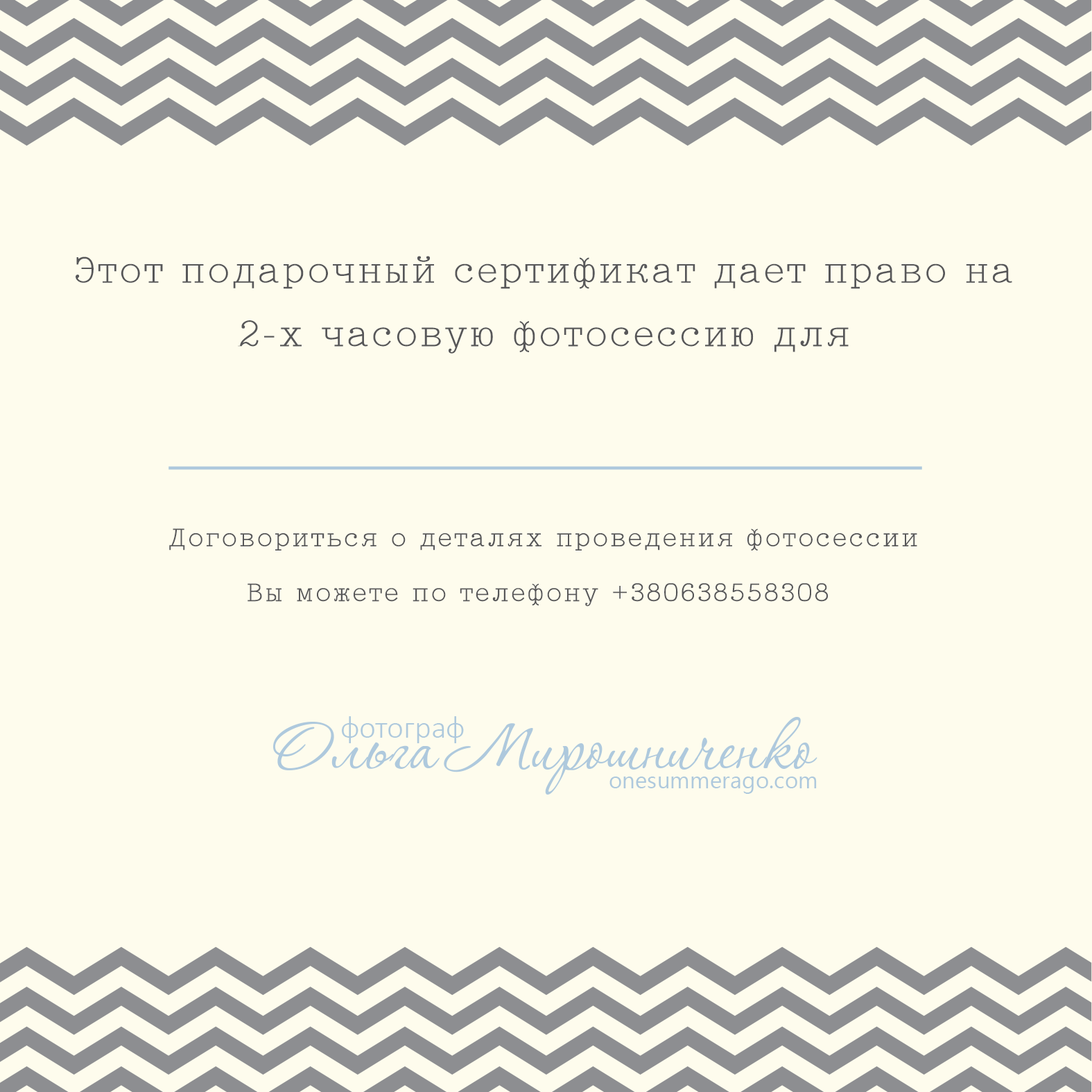
<style>
.page{position:relative;width:1092px;height:1092px;background:#fefced}
.page>*{position:absolute;margin:0}
.t1{font:34.9px/63.6px "TypeWriterCyrNormal";letter-spacing:0.025em;color:#575759;font-weight:bold;scale:1.08 1}
.t2{font:24.2px/54.9px "TypeWriterCyrNormal";letter-spacing:0.045em;color:#575759;font-weight:bold;scale:1.08 1}
.t3{font:86.7px "Corinthia";color:#aec9dd}
.t4{font:31.8px "Calibri-Light";color:#aec9dd}
.t5{font:23.1px "Ebrima";color:#aec9dd}
</style>
<div class="page">
<p class="t1" style="left:76px;top:256px;width:936px;height:98px;text-align:center">Этот подарочный сертификат дает право на<br>2-х часовую фотосессию для</p>
<p class="t2" style="left:169px;top:528px;width:748px;height:79px;text-align:center">Договориться о деталях проведения фотосессии<br>Вы можете по телефону +380638558308</p>
<p class="t3" style="left:273px;top:717px;width:544px;height:78px">Ольга Мирошниченко</p>
<p class="t4" style="left:342px;top:716px;width:122px;height:27px">фотограф</p>
<p class="t5" style="left:609px;top:777px;width:208px;height:17px">onesummerago.com</p>
</div>
